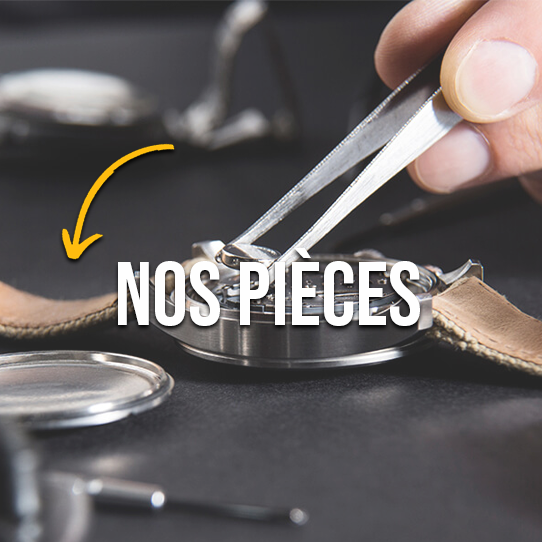
<style>
.page{position:relative;width:542px;height:542px}
.page>*{position:absolute;margin:0}
.t1{font:90px "BebasNeue-Regular";color:#fefefe}
</style>
<div class="page">
<p class="t1" style="left:118px;top:247px;width:302px;height:79px">nos pièces</p>
</div>
